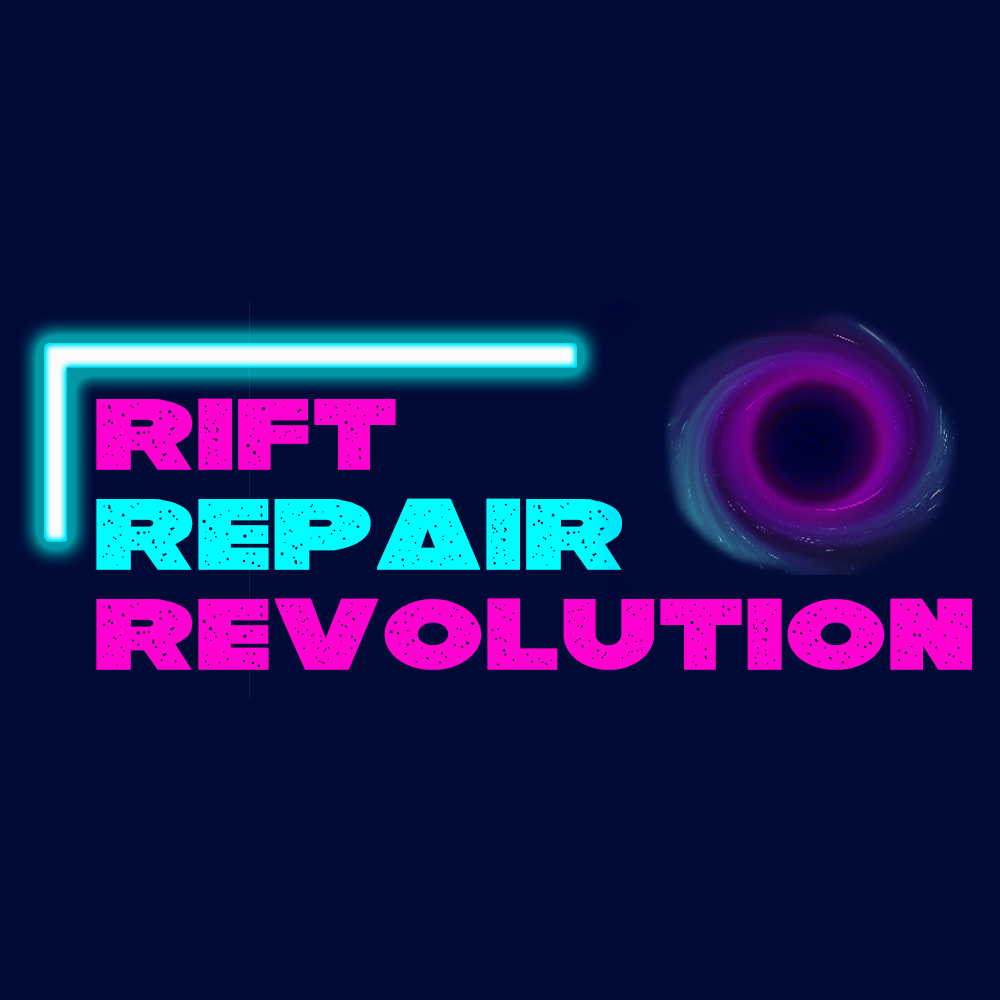
<style>
.page{position:relative;width:1000px;height:1000px;background:#000a36}
.page>*{position:absolute;margin:0}
.t1{font:108.3px/100px "Galaxy1";letter-spacing:0.01em;color:#ff02d2}
.t2{font:108.3px/100px "Galaxy1";letter-spacing:0.01em;color:#00fcff}
</style>
<div class="page">
<p class="t1" style="left:96px;top:398px;width:876px;height:272px">rift <br><span class="t2">repair </span>revolution</p>
</div>
